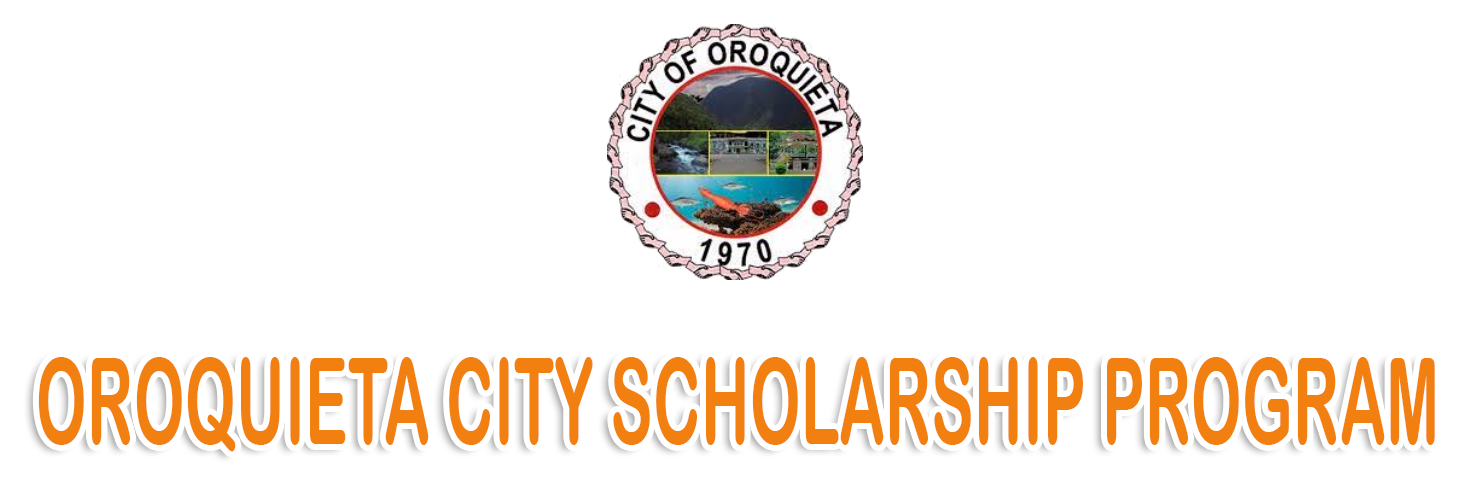
<style>
.page{position:relative;width:1470px;height:488px;background:#ffffff}
.page>*{position:absolute;margin:0}
.t1{font:120.4px "ArialRoundedMTBold";color:#f18011;scale:0.53 1}
</style>
<div class="page">
<p class="t1" style="left:38px;top:357px;width:1397px;height:95px">OROQUIETA CITY SCHOLARSHIP PROGRAM</p>
</div>
